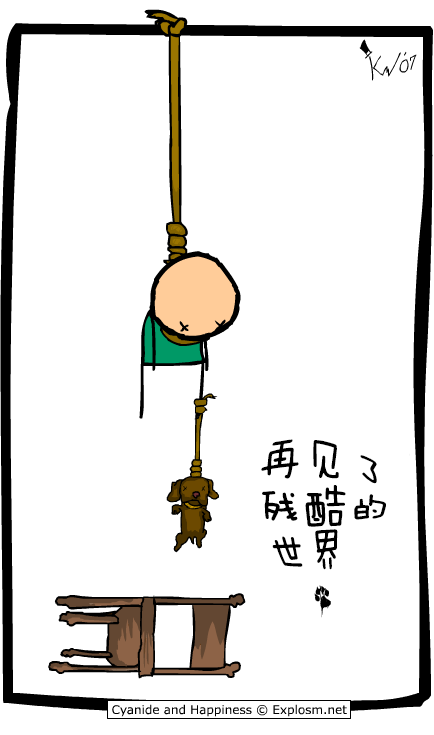
<style>
.page{position:relative;width:434px;height:735px;background:#ffffff}
.page>*{position:absolute;margin:0}
.t1{font:36px/18px "FZMWJW--GB1-0";color:#000000}
</style>
<div class="page">
<p class="t1" style="left:261px;top:439px;width:125px;height:131px">再见了<br><br>残酷的<br><br>世界</p>
</div>
